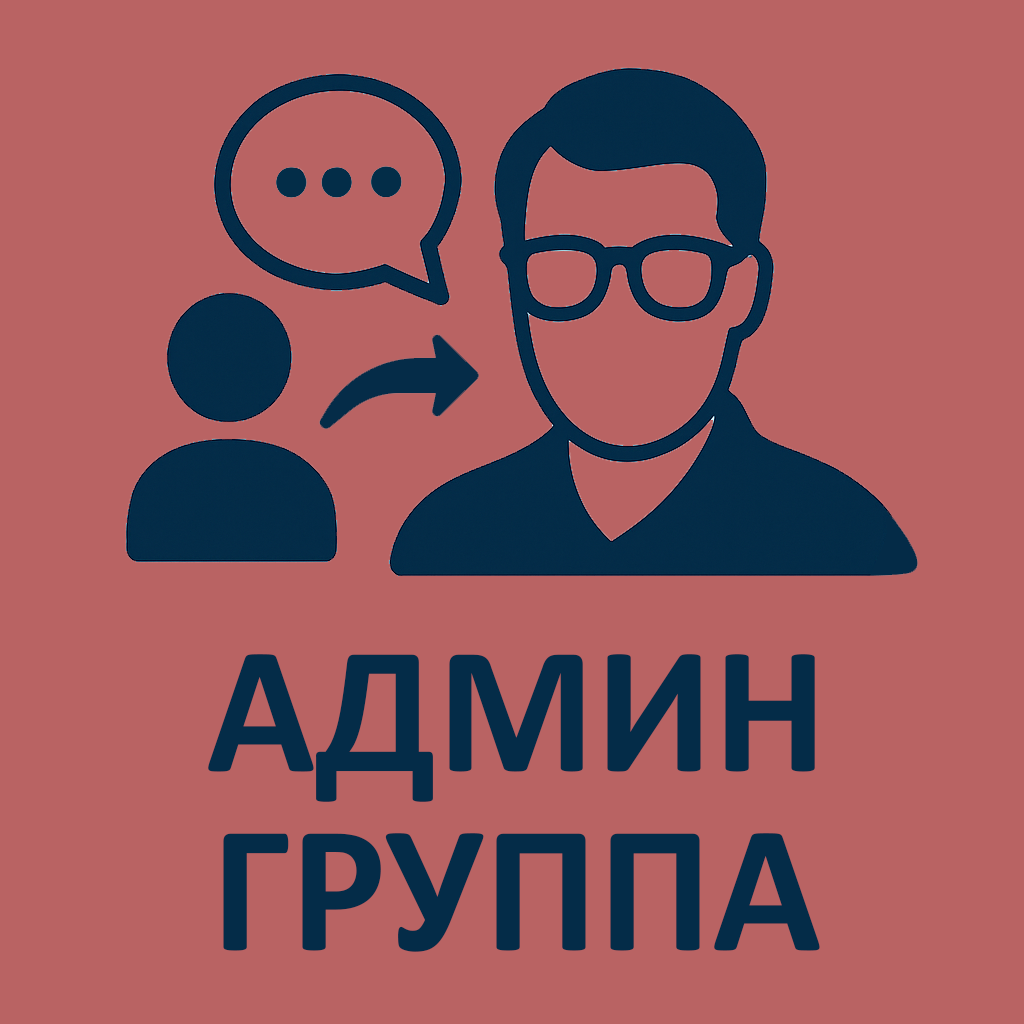
<style>
.page{position:relative;width:1024px;height:1024px;background:#b96363}
.page>*{position:absolute;margin:0}
.t1{font:183.7px/179px "Calibri-Bold";color:#042c48}
</style>
<div class="page">
<p class="t1" style="left:208px;top:654px;width:612px;height:298px;text-align:center">АДМИН<br>ГРУППА</p>
</div>
